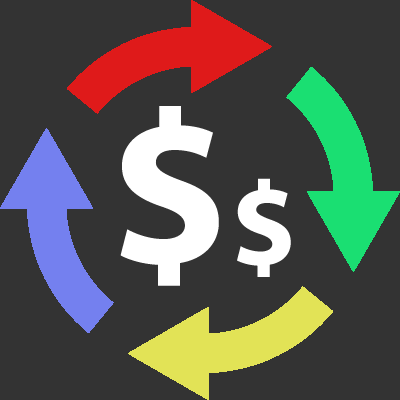
<style>
.page{position:relative;width:400px;height:400px;background:#333333}
.page>*{position:absolute;margin:0}
.t1{font:220px "MyriadPro-Bold";color:#ffffff}
.t2{font:120px "MyriadPro-Bold";color:#ffffff}
</style>
<div class="page">
<p class="t1" style="left:120px;top:106px;width:171px;height:180px">$<span class="t2">$</span></p>
</div>
